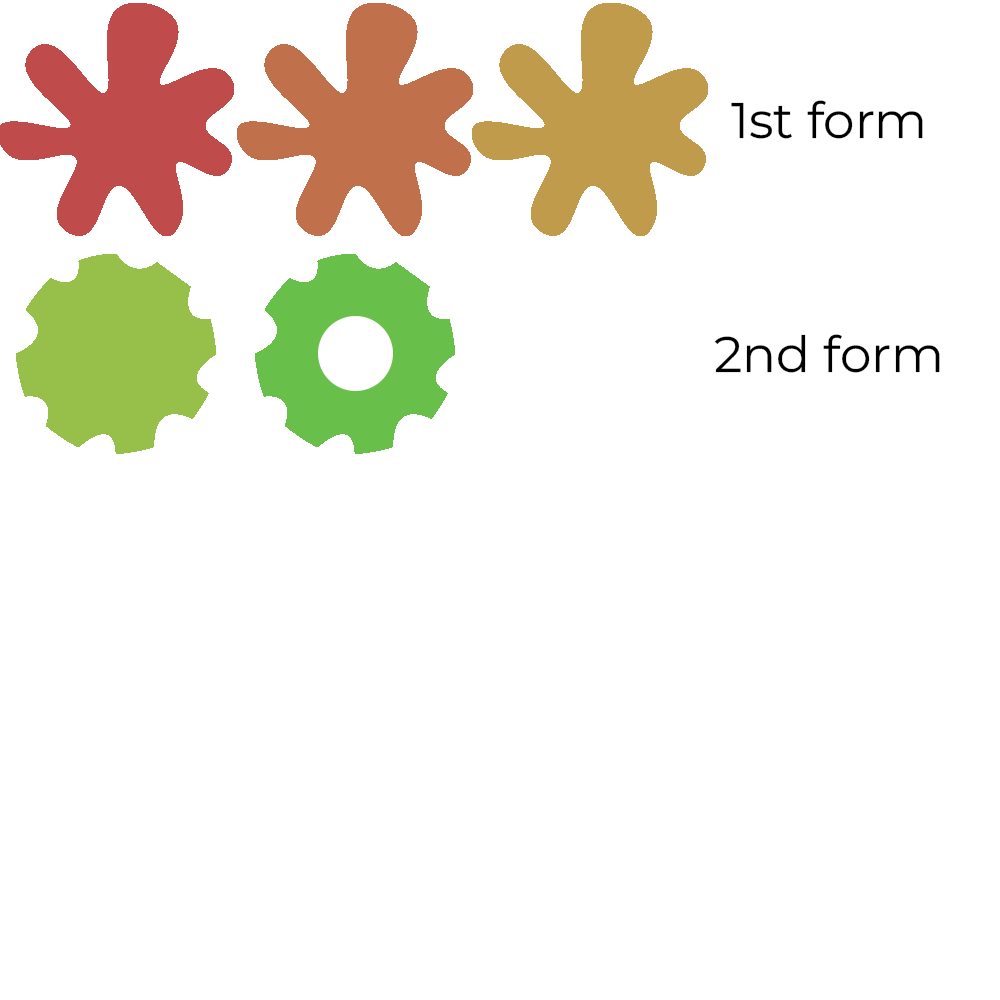
<style>
.page{position:relative;width:1000px;height:1000px;background:#ffffff}
.page>*{position:absolute;margin:0}
.t1{font:50px "MontserratRoman-Regular";color:#000000}
</style>
<div class="page">
<p class="t1" style="left:731px;top:100px;width:192px;height:39px">1st form</p>
<p class="t1" style="left:714px;top:334px;width:226px;height:39px">2nd form</p>
</div>
